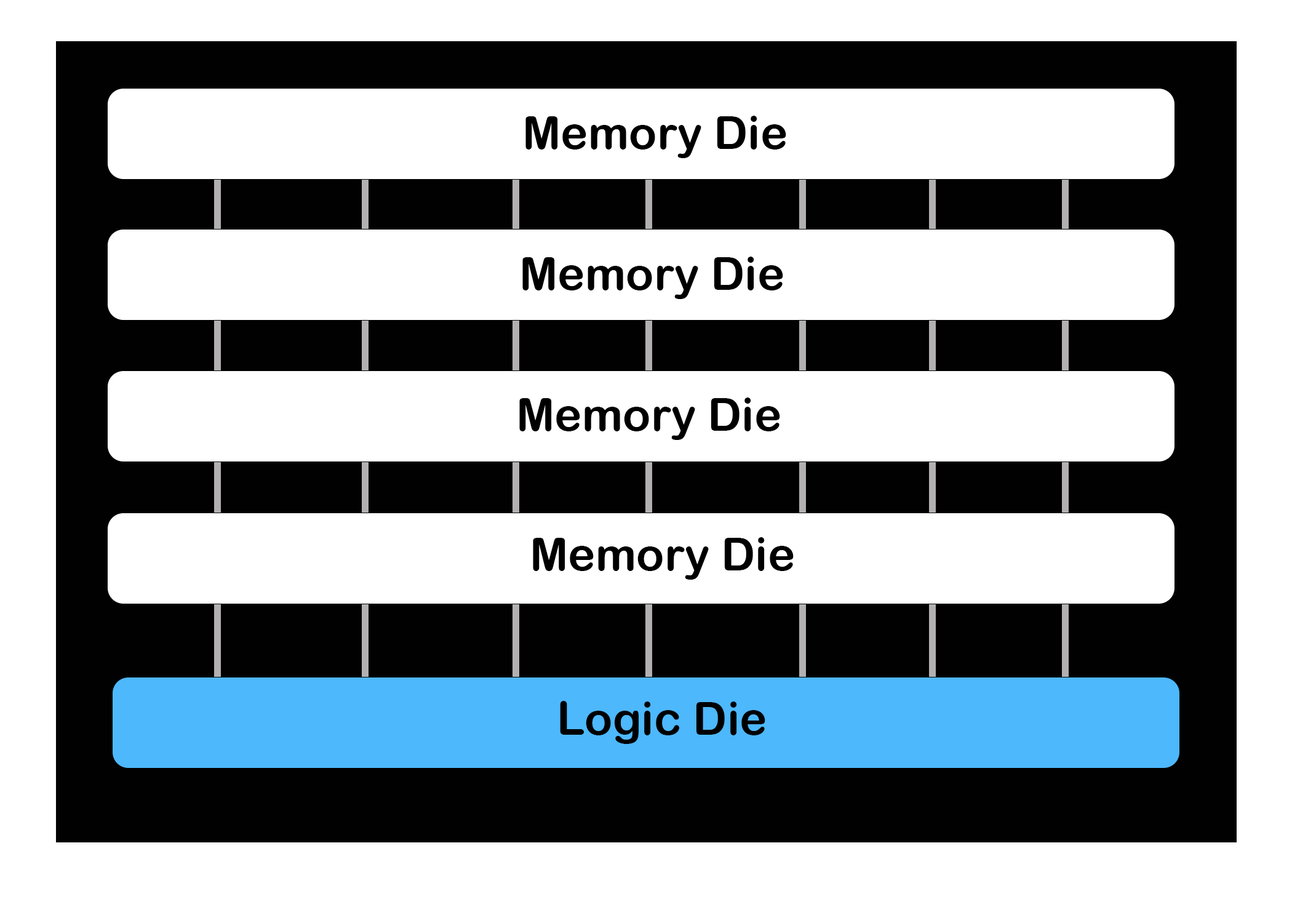
<style>
.page{position:relative;width:1292px;height:923px;background:#ffffff}
.page>*{position:absolute;margin:0}
.t1{font:46.1px "ArialRoundedMTBold";color:#000000}
</style>
<div class="page">
<p class="t1" style="left:525px;top:116px;width:261px;height:42px">Memory Die</p>
<p class="t1" style="left:522px;top:257px;width:261px;height:42px">Memory Die</p>
<p class="t1" style="left:519px;top:397px;width:261px;height:43px">Memory Die</p>
<p class="t1" style="left:533px;top:537px;width:261px;height:43px">Memory Die</p>
<p class="t1" style="left:560px;top:701px;width:205px;height:43px">Logic Die</p>
</div>
